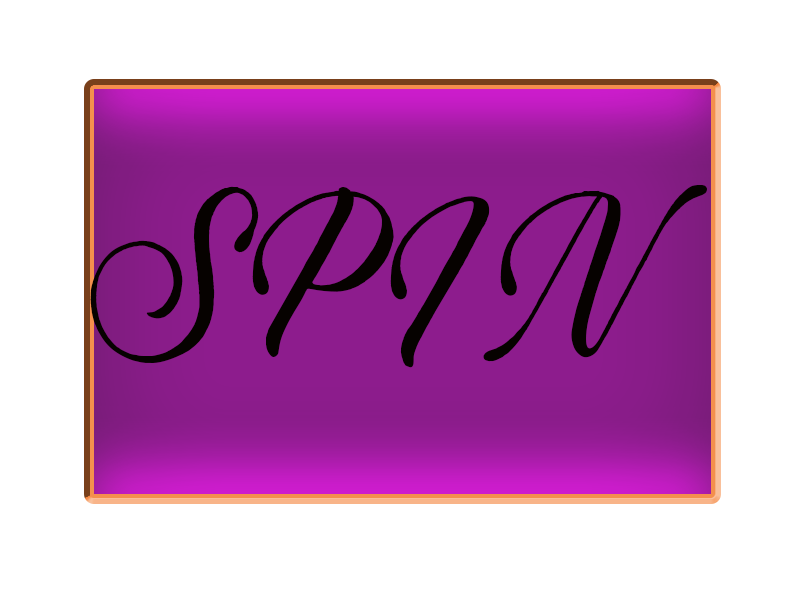
<style>
.page{position:relative;width:800px;height:600px;background:#ffffff}
.page>*{position:absolute;margin:0}
.t1{font:291.7px "Salazar";color:#060200}
</style>
<div class="page">
<p class="t1" style="left:90px;top:185px;width:617px;height:183px">SPIN</p>
</div>
